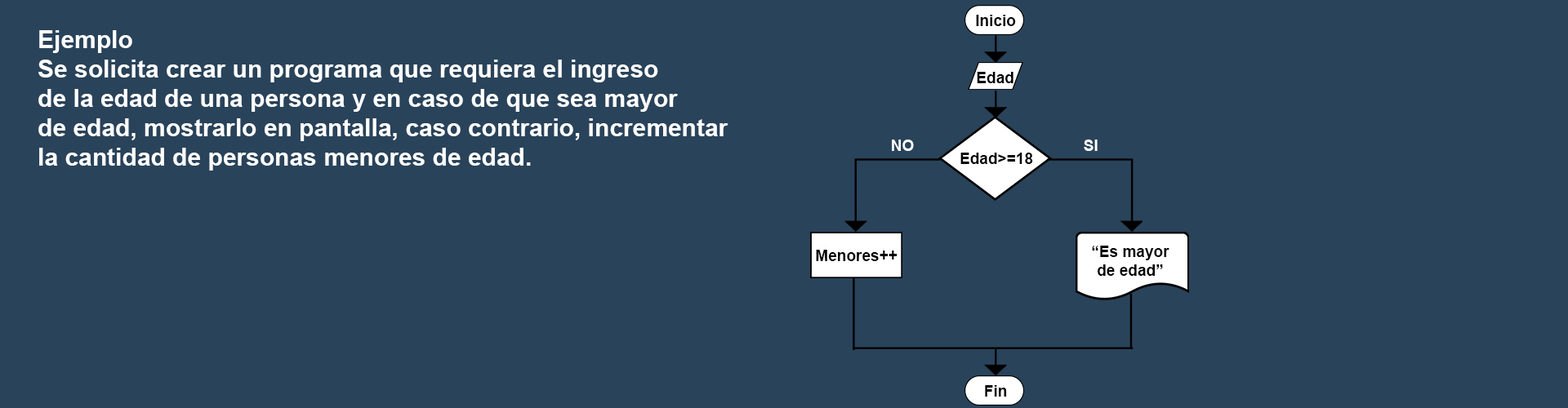
<style>
.page{position:relative;width:1568px;height:408px;background:#29435a}
.page>*{position:absolute;margin:0}
.t1{font:15.6px "Arial-BoldMT";color:#000000}
.t2{font:24.5px "Arial-BoldMT";color:#ffffff}
.t3{font:15.6px "Arial-BoldMT";color:#ffffff}
</style>
<div class="page">
<p class="t1" style="left:976px;top:15px;width:40px;height:11px">Inicio</p>
<p class="t2" style="left:38px;top:30px;width:690px;height:141px">Ejemplo<br>Se solicita crear un programa que requiera el ingreso<br>de la edad de una persona y en caso de que sea mayor<br>de edad, mostrarlo en pantalla, caso contrario, incrementar<br>la cantidad de personas menores de edad.</p>
<p class="t1" style="left:977px;top:72px;width:36px;height:11px">Edad</p>
<p class="t3" style="left:892px;top:140px;width:22px;height:11px">NO</p>
<p class="t3" style="left:1084px;top:140px;width:14px;height:11px">SI</p>
<p class="t1" style="left:960px;top:153px;width:73px;height:11px">Edad&gt;=18</p>
<p class="t1" style="left:1092px;top:246px;width:77px;height:30px;text-align:center">“Es mayor<br>de edad”</p>
<p class="t1" style="left:816px;top:250px;width:81px;height:11px">Menores++</p>
<p class="t1" style="left:985px;top:385px;width:22px;height:12px">Fin</p>
</div>
